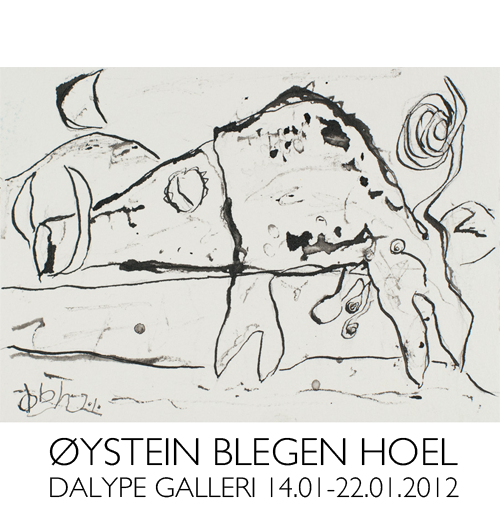
<style>
.page{position:relative;width:500px;height:506px;background:#ffffff}
.page>*{position:absolute;margin:0}
.t1{font:39.2px "GillSans-Light";color:#000000}
.t2{font:28.4px "GillSans-Light";color:#000000}
</style>
<div class="page">
<p class="t1" style="left:49px;top:437px;width:409px;height:29px">ØYSTEIN BLEGEN HOEL</p>
<p class="t2" style="left:50px;top:477px;width:409px;height:21px">DALYPE GALLERI 14.01-22.01.2012</p>
</div>
